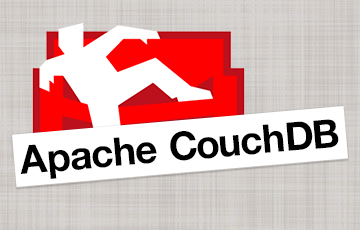
<style>
.page{position:relative;width:360px;height:230px;background:#ffffff}
.page>*{position:absolute;margin:0}
.t1{font:19.7px "HelveticaNeueLTStd-Bd";color:#000000}
</style>
<div class="page">
<p class="t1" style="left:20px;top:119px;width:319px;height:60px;rotate:-5deg">Apache CouchDB</p>
</div>
